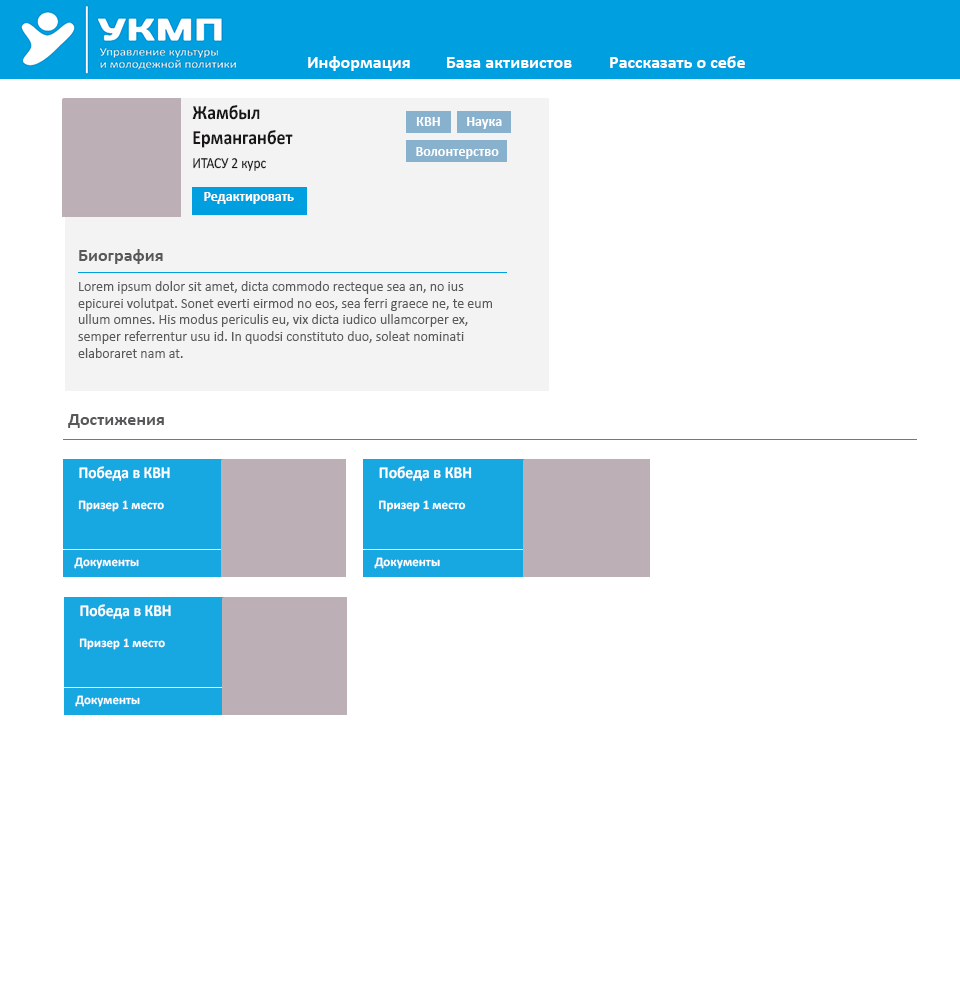
<style>
.page{position:relative;width:960px;height:1000px;background:#ffffff}
.page>*{position:absolute;margin:0}
.t1{font:18px "Calibri-Bold";color:#ffffff}
.t2{font:20.2px "Calibri-Bold";color:#181617;scale:0.89 1}
.t3{font:14px "Calibri-Bold";color:#fefefe}
.t4{font:15.1px "Calibri";color:#181617;scale:0.89 1}
.t5{font:14px "Calibri-Bold";color:#ffffff}
.t6{font:18px "Calibri-Bold";color:#59595b}
.t7{font:14px "Calibri";color:#59595b}
.t8{font:16.7px "Calibri-Bold";color:#ffffff;scale:0.92 1}
.t9{font:16.7px "Calibri-Bold";color:#ffffff;scale:0.93 1}
.t10{font:13px "Calibri-Bold";color:#ffffff}
.t11{font:13px "Calibri-Bold";color:#fefefe}
</style>
<div class="page">
<p class="t1" style="left:308px;top:56px;width:102px;height:15px">Информация</p>
<p class="t1" style="left:447px;top:57px;width:125px;height:11px">База активистов</p>
<p class="t1" style="left:610px;top:56px;width:135px;height:12px">Рассказать о себе</p>
<p class="t2" style="left:192px;top:105px;width:101px;height:43px">Жамбыл<br>Ерманганбет<br>тт</p>
<p class="t3" style="left:416px;top:117px;width:24px;height:9px">КВН</p>
<p class="t3" style="left:467px;top:117px;width:35px;height:12px">Наука</p>
<p class="t3" style="left:416px;top:147px;width:83px;height:12px">Волонтерство</p>
<p class="t4" style="left:193px;top:158px;width:73px;height:13px">ИТАСУ 2 курс</p>
<p class="t5" style="left:204px;top:192px;width:90px;height:12px">Редактировать</p>
<p class="t6" style="left:79px;top:249px;width:84px;height:15px">Биография</p>
<p class="t7" style="left:78px;top:281px;width:414px;height:77px">Lorem ipsum dolor sit amet, dicta commodo recteque sea an, no ius epicurei volutpat. Sonet everti eirmod no eos, sea ferri graece ne, te eum ullum omnes. His modus periculis eu, vix dicta iudico ullamcorper ex, semper referrentur usu id. In quodsi constituto duo, soleat nominati elaboraret nam at.</p>
<p class="t6" style="left:68px;top:414px;width:96px;height:14px">Достижения</p>
<p class="t8" style="left:79px;top:466px;width:91px;height:15px">Победа в КВН</p>
<p class="t9" style="left:379px;top:466px;width:93px;height:15px">Победа в КВН</p>
<p class="t10" style="left:78px;top:500px;width:86px;height:12px">Призер 1 место</p>
<p class="t10" style="left:379px;top:500px;width:87px;height:12px">Призер 1 место</p>
<p class="t11" style="left:74px;top:557px;width:65px;height:12px">Документы</p>
<p class="t11" style="left:374px;top:557px;width:66px;height:12px">Документы</p>
<p class="t8" style="left:80px;top:604px;width:91px;height:15px">Победа в КВН</p>
<p class="t10" style="left:79px;top:638px;width:86px;height:12px">Призер 1 место</p>
<p class="t11" style="left:75px;top:695px;width:65px;height:12px">Документы</p>
</div>
